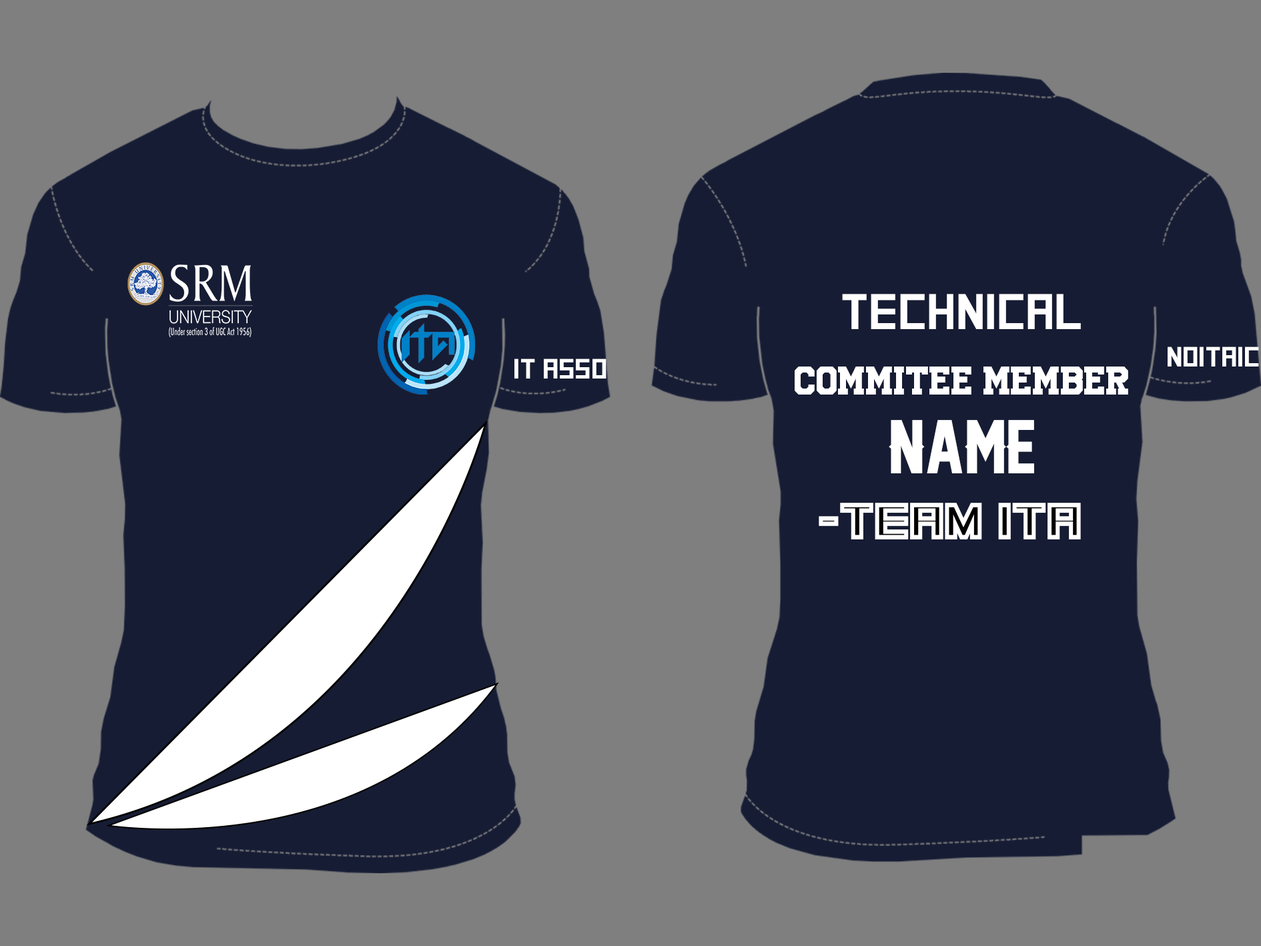
<style>
.page{position:relative;width:1261px;height:946px;background:#161c33}
.page>*{position:absolute;margin:0}
.t1{font:50px "SquareFont";color:#ffffff}
.t2{font:27.8px "SquareFont";color:#ffffff}
.t3{font:27.8px "UniversityRegular";color:#ffffff}
.t4{font:69.5px "LegendM54";color:#ffffff}
</style>
<div class="page">
<p class="t1" style="left:842px;top:294px;width:239px;height:35px">TECHNICAL</p>
<p class="t2" style="left:1168px;top:346px;width:91px;height:20px">noitaic</p>
<p class="t2" style="left:514px;top:358px;width:93px;height:20px">It asso</p>
<p class="t3" style="left:795px;top:366px;width:333px;height:28px">commitee member</p>
<p class="t4" style="left:889px;top:420px;width:145px;height:53px">name</p>
</div>
